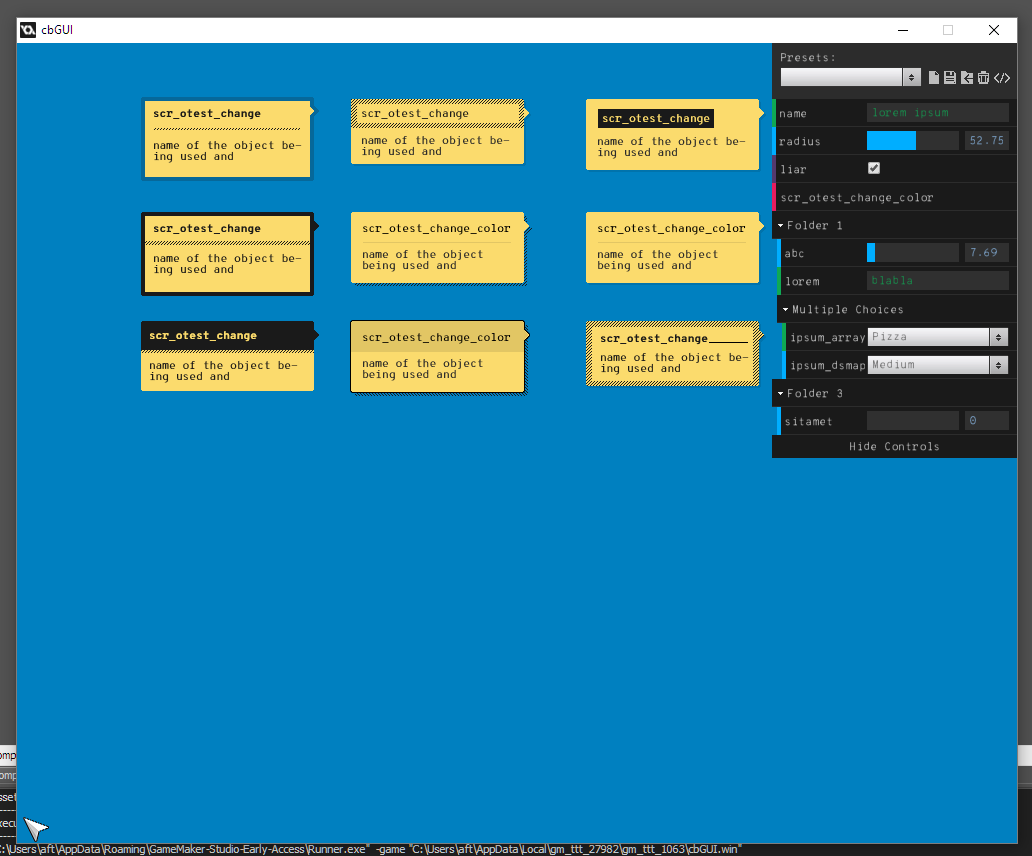
<style>
.page{position:relative;width:1032px;height:856px;background:#0080c0}
.page>*{position:absolute;margin:0}
.t1{font:11px "OverpassMono-Bold";color:#1a1a1a}
.t2{font:11px "OverpassMono-Light";color:#1a1a1a}
.t3{font:11px "OverpassMono-Light";color:#fbdb6d}
.t4{font:11px/26px "OverpassMono-Light";color:#2c2c2c}
.t5{font:11px/20px "OverpassMono-Light";color:#010101}
.t6{font:11px/11px "OverpassMono-Light";color:#2c2c2c}
.t7{font:11px/26px "OverpassMono-Light";color:#1a1a1a}
.t8{font:11px/11px "OverpassMono-Light";color:#1a1a1a}
.t9{font:11px "OverpassMono-Bold";color:#fbdb6d}
.t10{font:11px/20px "OverpassMono-Light";color:#1a1a1a}
</style>
<div class="page">
<p class="t1" style="left:154px;top:109px;width:107px;height:11px">scr_otest_change</p>
<p class="t2" style="left:362px;top:109px;width:107px;height:11px">scr_otest_change</p>
<p class="t3" style="left:603px;top:114px;width:107px;height:11px">scr_otest_change</p>
<p class="t4" style="left:362px;top:135px;width:148px;height:23px"><span class="t5"><br></span>name of the object <span class="t6">be-<br>ing used and</span></p>
<p class="t4" style="left:598px;top:136px;width:148px;height:23px"><span class="t5"><br></span>name of the object <span class="t6">be-<br>ing used and</span></p>
<p class="t7" style="left:154px;top:140px;width:148px;height:23px">name of the object <span class="t8">be-<br>ing used and</span></p>
<p class="t1" style="left:154px;top:224px;width:107px;height:11px">scr_otest_change</p>
<p class="t5" style="left:363px;top:224px;width:148px;height:48px">scr_otest_change_color<br><span class="t4">name of the object<br></span><span class="t6">being used and</span></p>
<p class="t5" style="left:598px;top:224px;width:148px;height:48px">scr_otest_change_color<br><span class="t4">name of the object<br></span><span class="t6">being used and</span></p>
<p class="t7" style="left:154px;top:253px;width:148px;height:23px">name of the object <span class="t8">be-<br>ing used and</span></p>
<p class="t9" style="left:150px;top:331px;width:107px;height:11px">scr_otest_change</p>
<p class="t5" style="left:363px;top:333px;width:148px;height:48px">scr_otest_change_color<br><span class="t4">name of the object<br></span><span class="t6">being used and</span></p>
<p class="t1" style="left:601px;top:334px;width:107px;height:11px">scr_otest_change</p>
<p class="t7" style="left:601px;top:352px;width:148px;height:23px"><span class="t10"><br></span>name of the object <span class="t8">be-<br>ing used and</span></p>
<p class="t7" style="left:150px;top:360px;width:148px;height:23px"><span class="t10"><br></span>name of the object <span class="t8">be-<br>ing used and</span></p>
</div>
